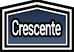
<style>
.page{position:relative;width:74px;height:52px}
.page>*{position:absolute;margin:0}
.t1{font:21.6px "Barlow-SemiBold";letter-spacing:-0.05em;color:#ffffff;scale:0.56 1}
</style>
<div class="page">
<p class="t1" style="left:12px;top:19px;width:49px;height:17px">Crescente</p>
</div>
